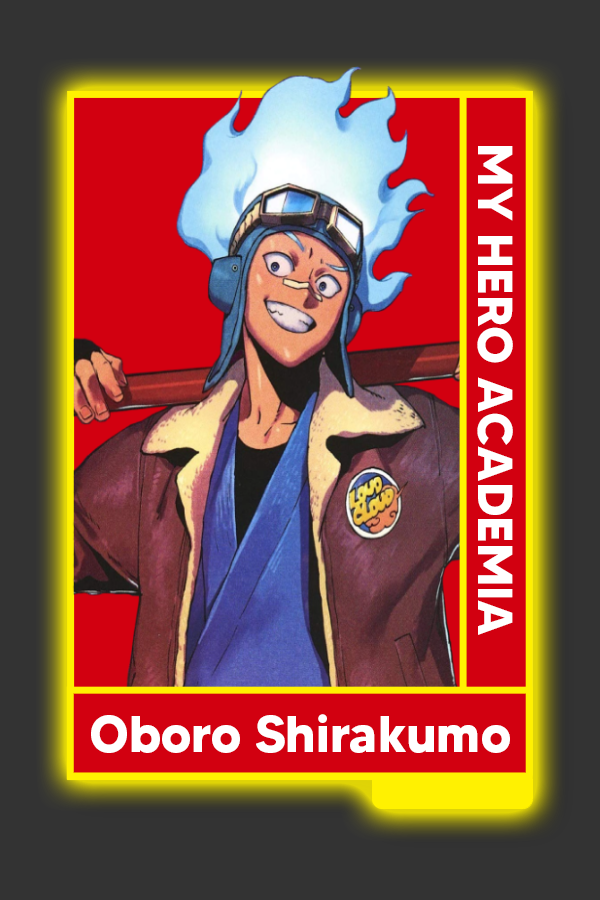
<style>
.page{position:relative;width:600px;height:900px;background:#333333}
.page>*{position:absolute;margin:0}
.t1{font:48.8px "MADETOMMY-Bold";color:#ffffff}
.t2{font:51.2px "MADETOMMY-Bold";color:#ffffff}
</style>
<div class="page">
<p class="t1" style="left:477px;top:146px;width:36px;height:489px;rotate:90deg">MY HERO ACADEMIA</p>
<p class="t2" style="left:91px;top:714px;width:419px;height:39px">Oboro Shirakumo</p>
</div>
